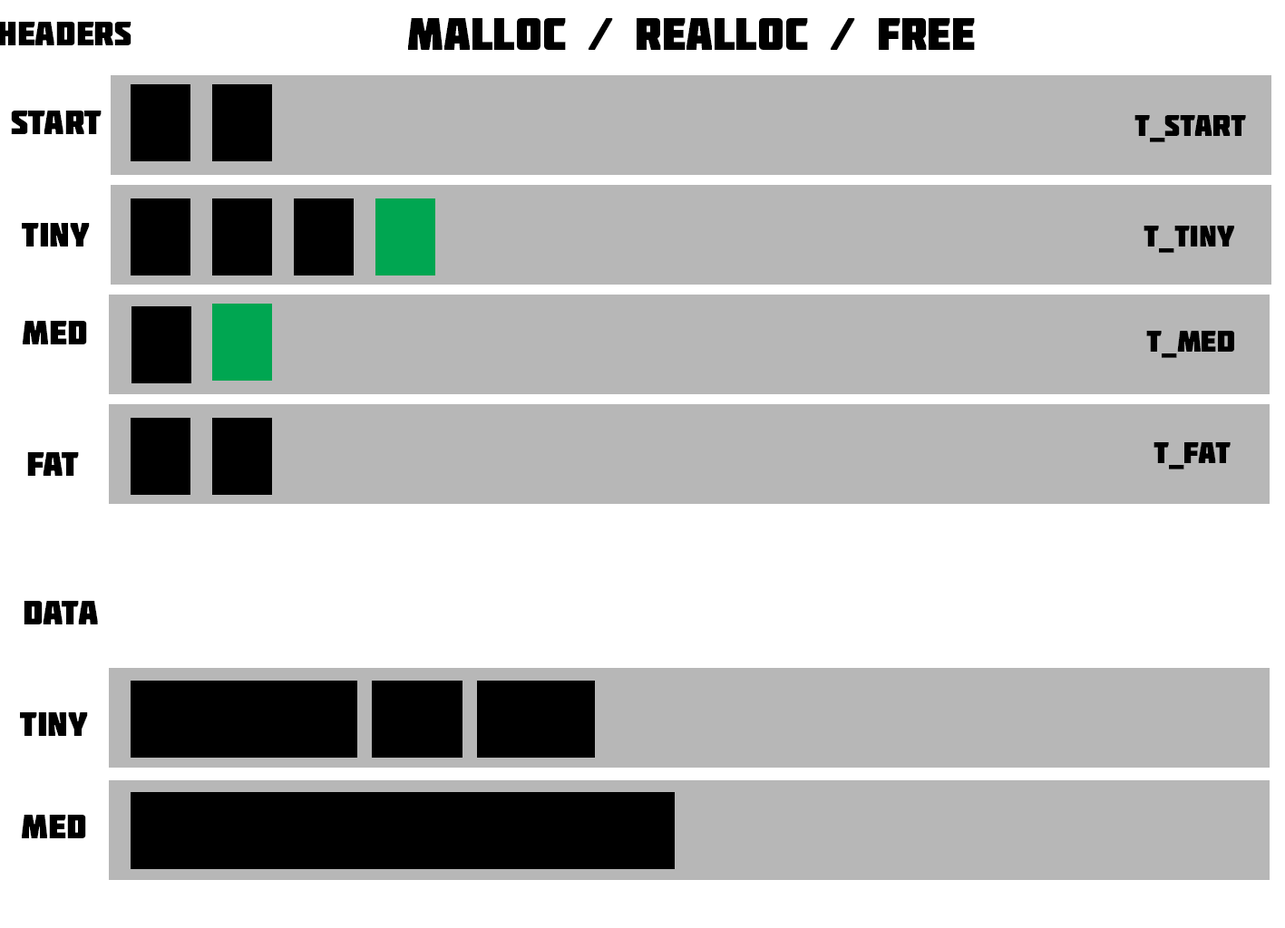
<style>
.page{position:relative;width:1285px;height:928px;background:#b7b7b7}
.page>*{position:absolute;margin:0}
.t1{font:45.3px "Molot";color:#000000}
.t2{font:34px "Molot";color:#000000}
.t3{font:30.2px "Molot";color:#000000}
</style>
<div class="page">
<p class="t1" style="left:408px;top:18px;width:567px;height:32px">MALLOC / Realloc / FREE</p>
<p class="t2" style="left:11px;top:111px;width:91px;height:23px">start</p>
<p class="t3" style="left:1134px;top:115px;width:112px;height:27px">t_start</p>
<p class="t2" style="left:22px;top:223px;width:68px;height:24px">Tiny</p>
<p class="t3" style="left:1143px;top:226px;width:91px;height:27px">T_TINY</p>
<p class="t2" style="left:23px;top:321px;width:64px;height:23px">Med</p>
<p class="t3" style="left:1146px;top:331px;width:88px;height:27px">T_MED</p>
<p class="t3" style="left:1153px;top:442px;width:77px;height:28px">T_FAT</p>
<p class="t2" style="left:27px;top:452px;width:52px;height:24px">FAT</p>
<p class="t2" style="left:24px;top:601px;width:74px;height:24px">DATA</p>
<p class="t2" style="left:20px;top:713px;width:68px;height:23px">TINY</p>
<p class="t2" style="left:22px;top:815px;width:64px;height:24px">MED</p>
</div>
